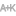
<style>
.page{position:relative;width:16px;height:16px;background:#ffffff}
.page>*{position:absolute;margin:0}
.t1{font:9.4px "ArialMT";letter-spacing:-0.15em;color:#afafaf;font-weight:bold}
</style>
<div class="page">
<p class="t1" style="left:0px;top:4px;width:16px;height:8px">A+K</p>
</div>
